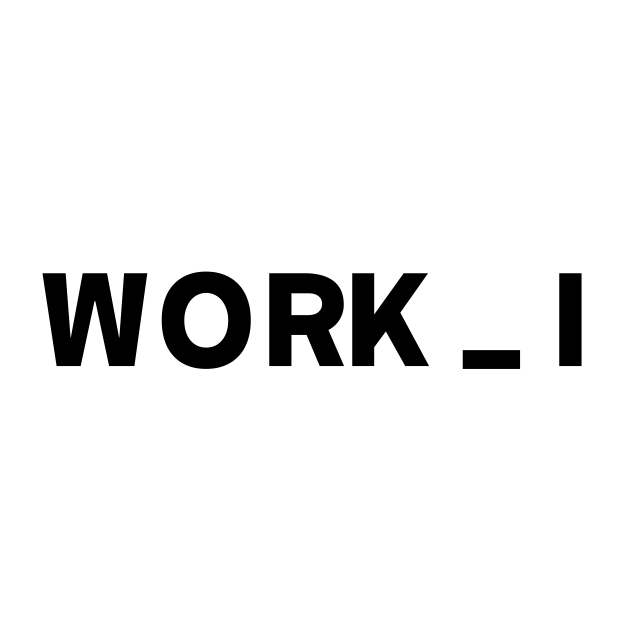
<style>
.page{position:relative;width:640px;height:640px;background:#ffffff}
.page>*{position:absolute;margin:0}
.t1{font:125px "GangwonEduPowerExtraBold";color:#000000}
</style>
<div class="page">
<p class="t1" style="left:42px;top:271px;width:540px;height:98px">WORK _ I</p>
</div>
